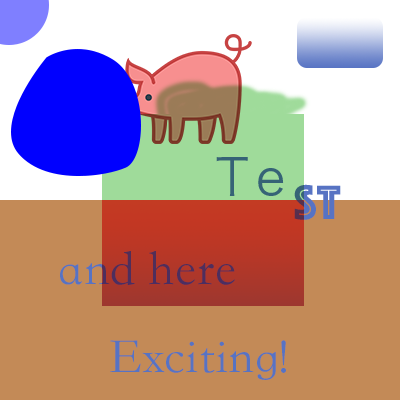
<style>
.page{position:relative;width:400px;height:400px;background:#c38a57}
.page>*{position:absolute;margin:0}
.t1{font:50px "STSong"}
.t2{font:50px/10px "HiraginoSansGB-W3";letter-spacing:0.2em}
.t3{font:50px/72px "Phosphate-Inline"}
</style>
<div class="page">
<p class="t1" style="left:60px;top:157px;width:281px;height:223px;text-align:justify"><span class="t2">Te</span><span class="t3">st<br></span>and here<br>Exciting!</p>
</div>
